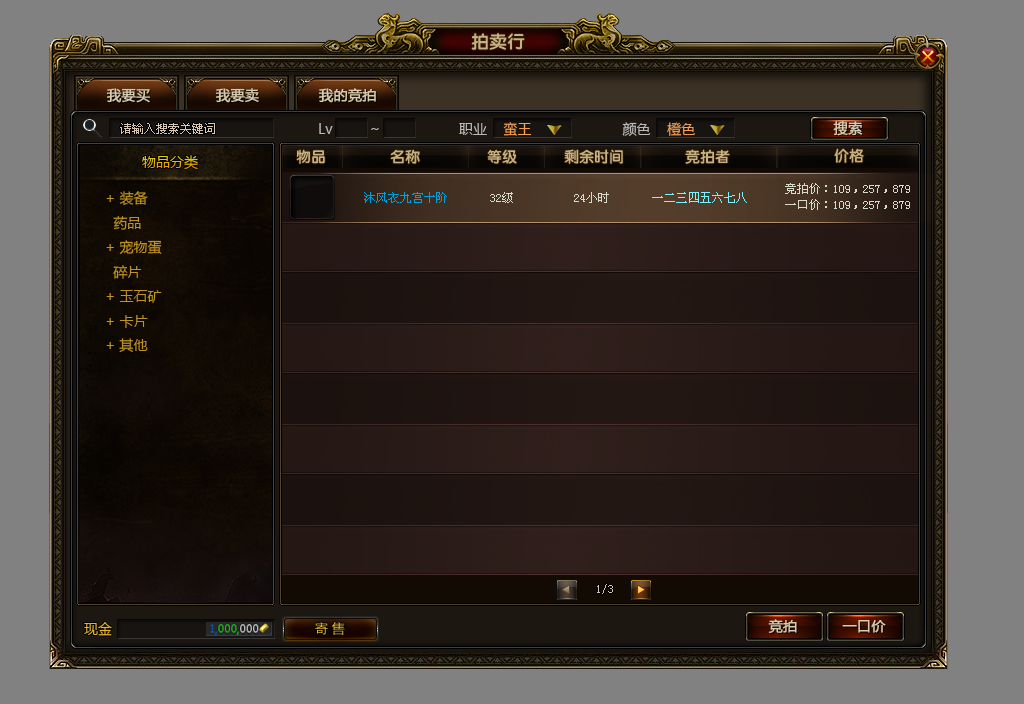
<style>
.page{position:relative;width:1024px;height:704px;background:#818181}
.page>*{position:absolute;margin:0}
.t1{font:18px "FZY4JW--GB1-0";color:#c5b181}
.t2{font:14px "MicrosoftYaHei";color:#d5cbad;font-weight:bold}
.t3{font:12px "SimSun";color:#d7c6b4}
.t4{font:14px "MicrosoftYaHei";color:#bbb9b9}
.t5{font:14px "MicrosoftYaHei";color:#f79e4f}
.t6{font:15px "FZY4JW--GB1-0";color:#c5b181}
.t7{font:14px "MicrosoftYaHei"}
.t8{font:12px/16px "SimSun";color:#d9dbca}
.t9{font:14px "MicrosoftYaHei";color:#bf931f}
.t10{font:12px "SimSun";color:#d9dbca}
.t11{font:12px "SimSun";color:#00a1dd}
.t12{font:12px "SimSun";color:#77f4ff}
.t13{font:14px "MicrosoftYaHei";color:#e8b630}
.t14{font:13px "MicrosoftYaHei";color:#e8b630}
</style>
<div class="page">
<p class="t1" style="left:471px;top:33px;width:54px;height:17px">拍卖行</p>
<p class="t2" style="left:107px;top:88px;width:43px;height:15px">我要买</p>
<p class="t2" style="left:216px;top:88px;width:43px;height:15px">我要卖</p>
<p class="t2" style="left:319px;top:88px;width:57px;height:15px">我的竞拍</p>
<p class="t3" style="left:120px;top:123px;width:95px;height:11px">请输入搜索关键词</p>
<p class="t4" style="left:319px;top:122px;width:376px;height:14px">Lv         ~                   职业    <span class="t5">蛮王</span>                      颜色    <span class="t5">橙色</span></p>
<p class="t2" style="left:833px;top:121px;width:30px;height:15px">搜索</p>
<p class="t6" style="left:296px;top:149px;width:29px;height:15px">物品</p>
<p class="t6" style="left:390px;top:149px;width:30px;height:15px">名称</p>
<p class="t6" style="left:487px;top:149px;width:30px;height:15px">等级</p>
<p class="t6" style="left:564px;top:149px;width:59px;height:15px">剩余时间</p>
<p class="t6" style="left:685px;top:149px;width:45px;height:15px">竞拍者</p>
<p class="t6" style="left:834px;top:148px;width:30px;height:15px">价格</p>
<p class="t7" style="left:142px;top:155px;width:56px;height:15px">物品分类</p>
<p class="t8" style="left:785px;top:183px;width:125px;height:27px">竞拍价：109，257，879<br>一口价：109，257，879</p>
<p class="t9" style="left:106px;top:191px;width:56px;height:162px">+ 装备<br>  药品<br>+ 宠物蛋<br>  碎片<br>+ 玉石矿<br>+ 卡片<br>+ 其他</p>
<p class="t10" style="left:364px;top:192px;width:383px;height:11px"><span class="t11">沐风衣九宫十阶       </span>32级          24小时       <span class="t12">一二三四五六七八</span></p>
<p class="t3" style="left:597px;top:584px;width:16px;height:10px">1/3</p>
<p class="t13" style="left:84px;top:622px;width:28px;height:14px">现金</p>
<p class="t14" style="left:315px;top:622px;width:30px;height:13px">寄 售</p>
<p class="t2" style="left:768px;top:619px;width:29px;height:14px">竞拍</p>
<p class="t2" style="left:842px;top:620px;width:44px;height:13px">一口价</p>
</div>
